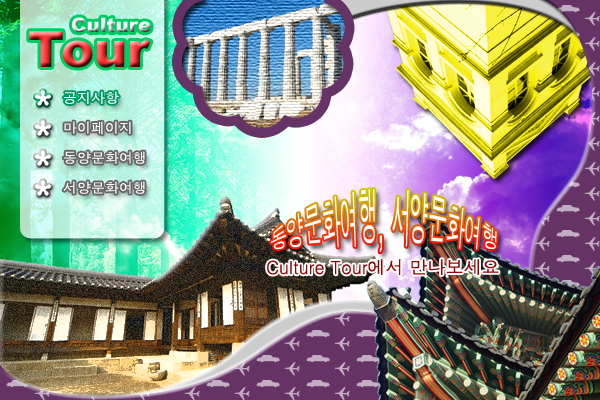
<style>
.page{position:relative;width:600px;height:400px}
.page>*{position:absolute;margin:0}
.t1{font:20px "Arial-Black"}
.t2{font:50px "Arial-Black"}
.t3{font:14px "Dotum";color:#ffffff}
.t4{font:18px "Dotum";color:#ffffff}
.t5{font:18px "Dotum";color:#990000}
</style>
<div class="page">
<p class="t1" style="left:72px;top:17px;width:79px;height:16px">Culture</p>
<p class="t2" style="left:29px;top:31px;width:122px;height:37px">Tour</p>
<p class="t3" style="left:63px;top:91px;width:56px;height:13px">공지사항</p>
<p class="t3" style="left:64px;top:121px;width:67px;height:14px">마이페이지</p>
<p class="t3" style="left:63px;top:151px;width:82px;height:13px">동양문화여행</p>
<p class="t3" style="left:63px;top:181px;width:82px;height:13px">서양문화여행</p>
<p class="t4" style="left:270px;top:189px;width:227px;height:64px">동양문화여행, 서양문화여행</p>
<p class="t5" style="left:267px;top:259px;width:232px;height:16px">Culture Tour에서 만나보세요</p>
</div>
